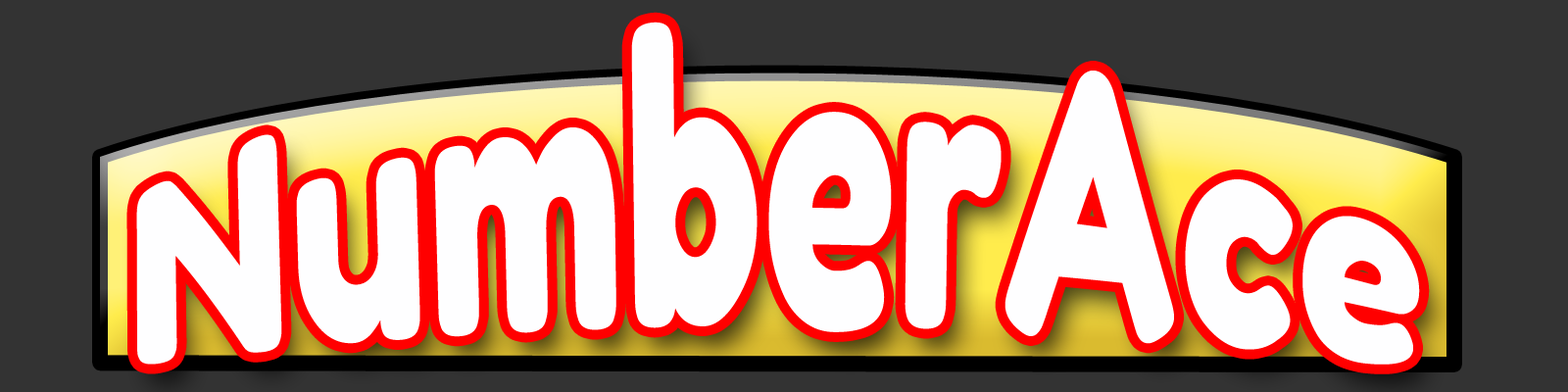
<style>
.page{position:relative;width:1568px;height:392px;background:#333333}
.page>*{position:absolute;margin:0}
.t1{font:229.3px "FredokaOne-Regular";color:#fefeff}
</style>
<div class="page">
<p class="t1" style="left:136px;top:22px;width:1284px;height:343px">NumberAce</p>
</div>
